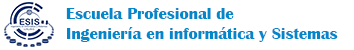
<style>
.page{position:relative;width:354px;height:50px;background:#ffffff}
.page>*{position:absolute;margin:0}
.t1{font:16.7px "BritannicBold";color:#0287cb}
</style>
<div class="page">
<p class="t1" style="left:66px;top:8px;width:272px;height:34px">Escuela Profesional de <br>Ingeniería en informática y Sistemas</p>
</div>
